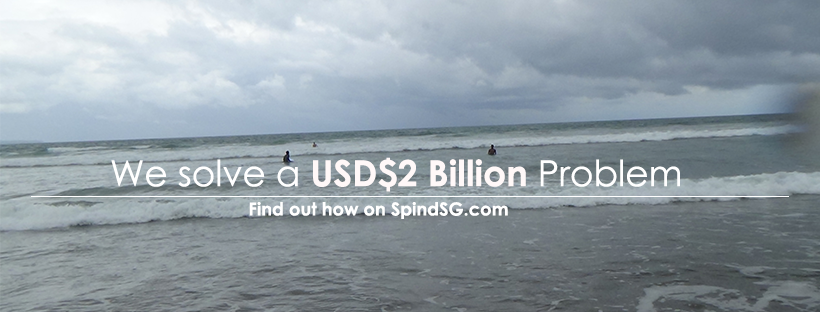
<style>
.page{position:relative;width:820px;height:312px}
.page>*{position:absolute;margin:0}
.t1{font:36px "CenturyGothic-Bold";color:#fff8f8}
.t2{font:36px "CenturyGothic";color:#565656}
.t3{font:36px "CenturyGothic";color:#ffffff}
.t4{font:18px "CenturyGothic-Bold";color:#ffffff}
</style>
<div class="page">
<p class="t1" style="left:111px;top:157px;width:569px;height:35px"><span class="t2"><br></span><span class="t3">We solve a </span>USD$2 Billion <span class="t3">Problem</span></p>
<p class="t4" style="left:249px;top:202px;width:259px;height:17px">Find out how on SpindSG.com</p>
</div>
